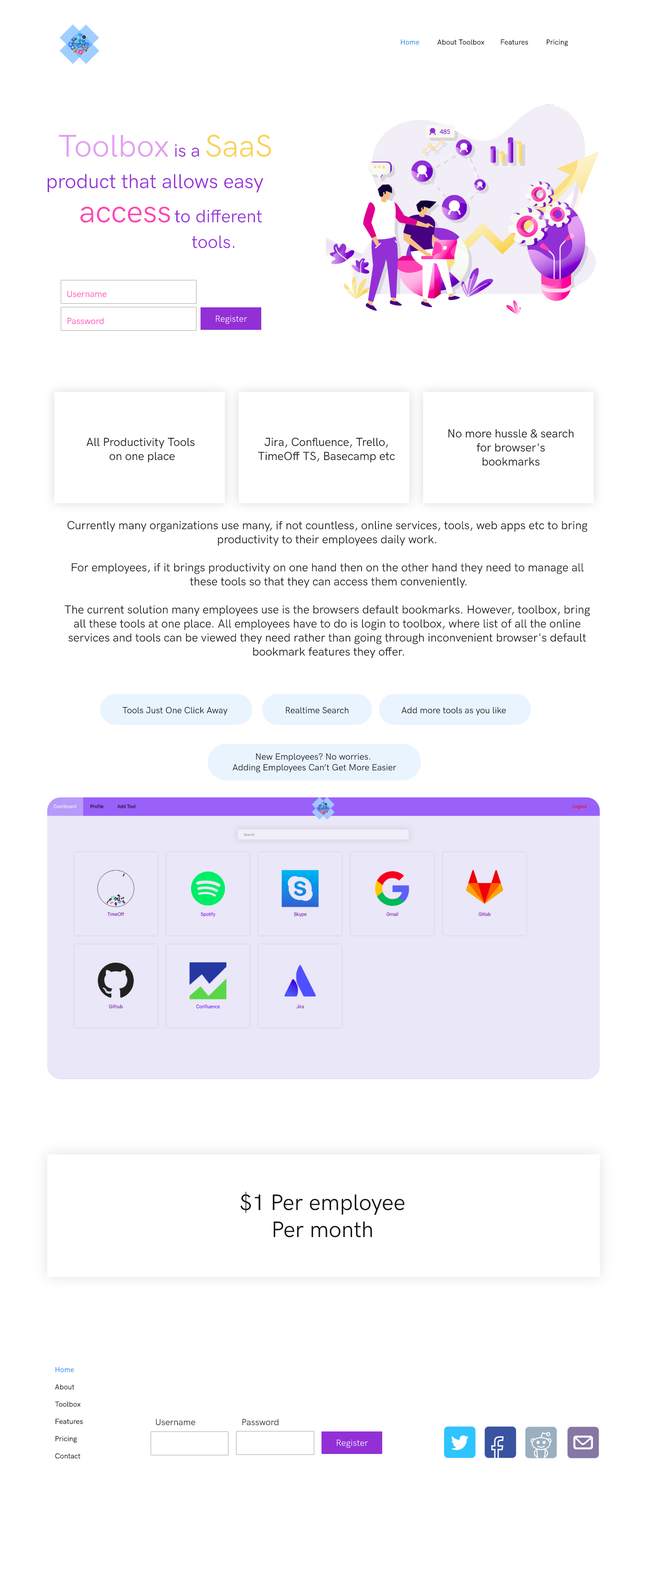
<style>
.page{position:relative;width:652px;height:1575px;background:#ffffff}
.page>*{position:absolute;margin:0}
.t1{font:7.2px "HKGrotesk-Regular";color:#000000}
.t2{font:7.2px "HKGrotesk-Regular";color:#1875f0}
.t3{font:31.5px "HKGrotesk-RegularLegacy";color:#e39ff1}
.t4{font:18px "HKGrotesk-RegularLegacy";color:#9230d6}
.t5{font:31.5px "HKGrotesk-RegularLegacy";color:#f9d359}
.t6{font:20.2px "HKGrotesk-RegularLegacy";color:#9230d6}
.t7{font:31.5px "HKGrotesk-RegularLegacy";color:#ff43b2}
.t8{font:18px "HKGrotesk-Regular";color:#9230d6}
.t9{font:9px "HKGrotesk-RegularLegacy";color:#ff42b1}
.t10{font:9px "HKGrotesk-RegularLegacy";color:#ffffff}
.t11{font:11.7px "HKGrotesk-RegularLegacy";color:#131313}
.t12{font:11.7px "HKGrotesk-RegularLegacy";color:#1a191a}
.t13{font:9px "HKGrotesk-RegularLegacy";color:#131313}
.t14{font:22.5px "HKGrotesk-RegularLegacy";color:#131313}
.t15{font:9px "HKGrotesk-RegularLegacy";color:#252525}
</style>
<div class="page">
<p class="t1" style="left:401px;top:39px;width:167px;height:7px"><span class="t2">Home         </span>About Toolbox        Features         Pricing</p>
<p class="t3" style="left:59px;top:135px;width:212px;height:22px">Toolbox<span class="t4"> is a </span><span class="t5">SaaS</span></p>
<p class="t6" style="left:47px;top:174px;width:217px;height:19px">product that allows easy</p>
<p class="t4" style="left:80px;top:207px;width:182px;height:16px"><span class="t7">access </span><span class="t8">to </span>different</p>
<p class="t4" style="left:192px;top:235px;width:42px;height:13px">tools.</p>
<p class="t9" style="left:67px;top:291px;width:40px;height:33px">Username<br><br>Password</p>
<p class="t10" style="left:216px;top:315px;width:32px;height:9px">Register</p>
<p class="t11" style="left:86px;top:438px;width:109px;height:25px;text-align:center">All Productivity Tools <br>on one place</p>
<p class="t11" style="left:258px;top:437px;width:137px;height:26px;text-align:center">Jira, Confluence, Trello,<br>TimeOff TS, Basecamp etc</p>
<p class="t11" style="left:449px;top:429px;width:125px;height:37px;text-align:center">No more hussle &amp; search<br>for browser's<br>bookmarks</p>
<p class="t12" style="left:64px;top:521px;width:526px;height:137px;text-align:center">Currently many organizations use many, if not countless, online services, tools, web apps etc to bring <br>productivity to their employees daily work. <br><br>For employees, if it brings productivity on one hand then on the other hand they need to manage all <br>these tools so that they can access them conveniently.<br><br>The current solution many employees use is the browsers default bookmarks. However, toolbox, bring <br>all these tools at one place. All employees have to do is login to toolbox, where list of all the online <br>services and tools can be viewed they need rather than going through inconvenient browser's default <br>bookmark features they offer.</p>
<p class="t13" style="left:122px;top:707px;width:106px;height:9px">Tools Just One Click Away</p>
<p class="t13" style="left:286px;top:707px;width:63px;height:7px">Realtime Search</p>
<p class="t13" style="left:402px;top:707px;width:104px;height:9px">Add more tools as you like</p>
<p class="t13" style="left:233px;top:753px;width:164px;height:20px;text-align:center">New Employees? No worries. <br>Adding Employees Can’t Get More Easier</p>
<p class="t14" style="left:240px;top:1192px;width:165px;height:46px;text-align:center">$1 Per employee<br>Per month</p>
<p class="t1" style="left:55px;top:1367px;width:28px;height:92px"><span class="t2">Home<br><br></span>About<br><br>Toolbox<br><br>Features<br><br>Pricing<br><br>Contact</p>
<p class="t15" style="left:156px;top:1419px;width:123px;height:7px">Username                    Password</p>
<p class="t10" style="left:337px;top:1440px;width:32px;height:8px">Register</p>
</div>
